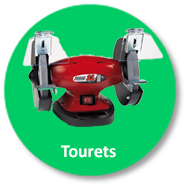
<style>
.page{position:relative;width:185px;height:185px;background:#00cc66}
.page>*{position:absolute;margin:0}
.t1{font:18px "Calibri-Bold";color:#ffffff}
</style>
<div class="page">
<p class="t1" style="left:61px;top:145px;width:55px;height:13px">Tourets</p>
</div>
